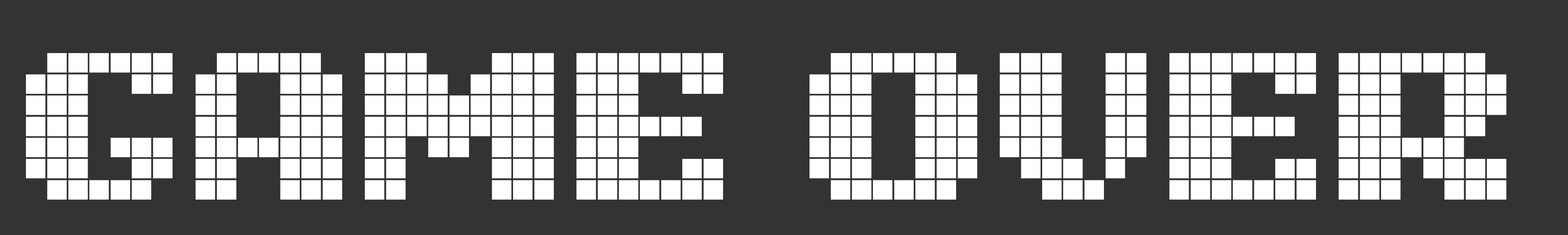
<style>
.page{position:relative;width:1568px;height:235px;background:#333333}
.page>*{position:absolute;margin:0}
.t1{font:169.4px "Unibody8Pro-Black";color:#ffffff}
</style>
<div class="page">
<p class="t1" style="left:26px;top:53px;width:1481px;height:147px">GAME OVER</p>
</div>
